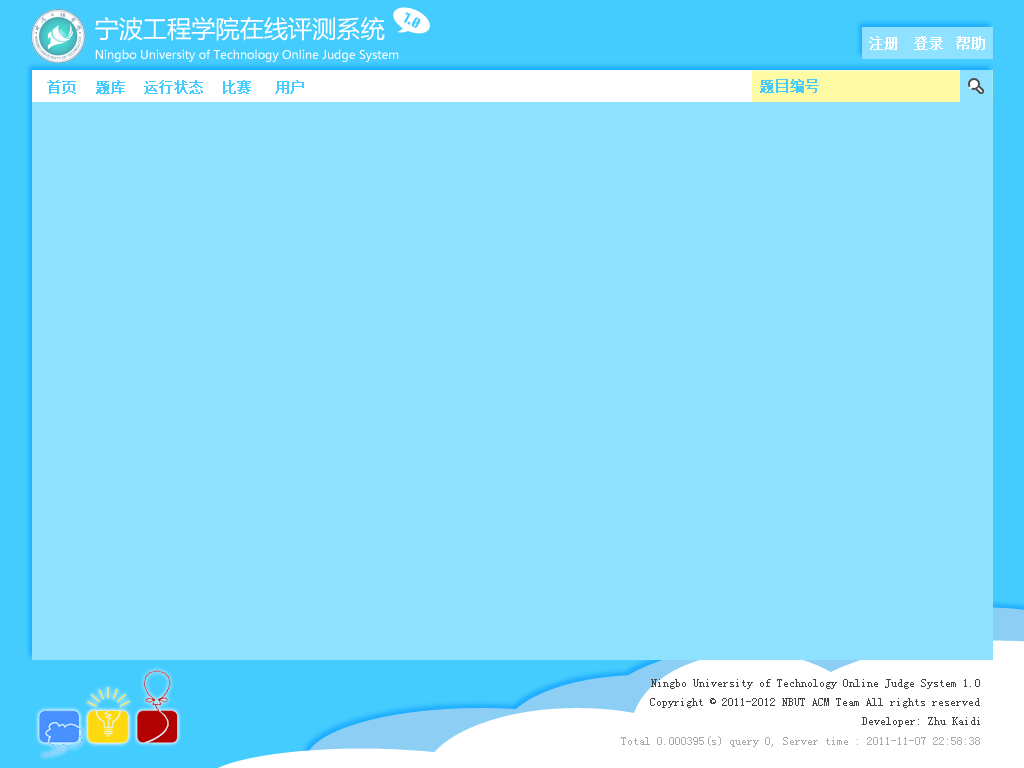
<style>
.page{position:relative;width:1024px;height:768px;background:#8ee1ff}
.page>*{position:absolute;margin:0}
.t1{font:24.2px "MicrosoftYaHei";color:#ffffff}
.t2{font:11.7px "MuteFruit";color:#44ccff}
.t3{font:14px "SimSun";color:#ffffff;font-weight:bold}
.t4{font:11.7px "MicrosoftYaHei";color:#ffffff}
.t5{font:14px "SimSun";color:#44ccff;font-weight:bold}
.t6{font:12px "SimSun";color:#444444}
.t7{font:12px "SimSun";color:#aaaaaa}
</style>
<div class="page">
<p class="t1" style="left:95px;top:16px;width:290px;height:25px">宁波工程学院在线评测系统</p>
<p class="t2" style="left:403px;top:12px;width:18px;height:16px;rotate:28deg">1.0</p>
<p class="t3" style="left:869px;top:36px;width:29px;height:14px">注册</p>
<p class="t3" style="left:914px;top:36px;width:29px;height:14px">登录</p>
<p class="t3" style="left:956px;top:36px;width:29px;height:14px">帮助</p>
<p class="t4" style="left:95px;top:49px;width:304px;height:13px">Ningbo University of Technology Online Judge System</p>
<p class="t5" style="left:47px;top:80px;width:29px;height:14px">首页</p>
<p class="t5" style="left:96px;top:80px;width:29px;height:14px">题库</p>
<p class="t5" style="left:144px;top:80px;width:59px;height:14px">运行状态</p>
<p class="t5" style="left:223px;top:80px;width:28px;height:14px">比赛</p>
<p class="t5" style="left:275px;top:80px;width:29px;height:14px">用户</p>
<p class="t5" style="left:760px;top:79px;width:59px;height:14px">题目编号</p>
<p class="t6" style="left:651px;top:679px;width:329px;height:10px">Ningbo University of Technology Online Judge System 1.0</p>
<p class="t6" style="left:650px;top:698px;width:330px;height:10px">Copyright © 2011-2012 NBUT ACM Team All rights reserved</p>
<p class="t6" style="left:862px;top:717px;width:118px;height:10px">Developer: Zhu Kaidi</p>
<p class="t7" style="left:621px;top:736px;width:359px;height:11px">Total 0.000395(s) query 0, Server time : 2011-11-07 22:58:38</p>
</div>
